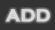
<style>
.page{position:relative;width:55px;height:30px;background:#333333}
.page>*{position:absolute;margin:0}
.t1{font:18px "CopperplateGothic-Bold";color:#dcd9d9}
</style>
<div class="page">
<p class="t1" style="left:5px;top:9px;width:45px;height:13px">ADD</p>
</div>
